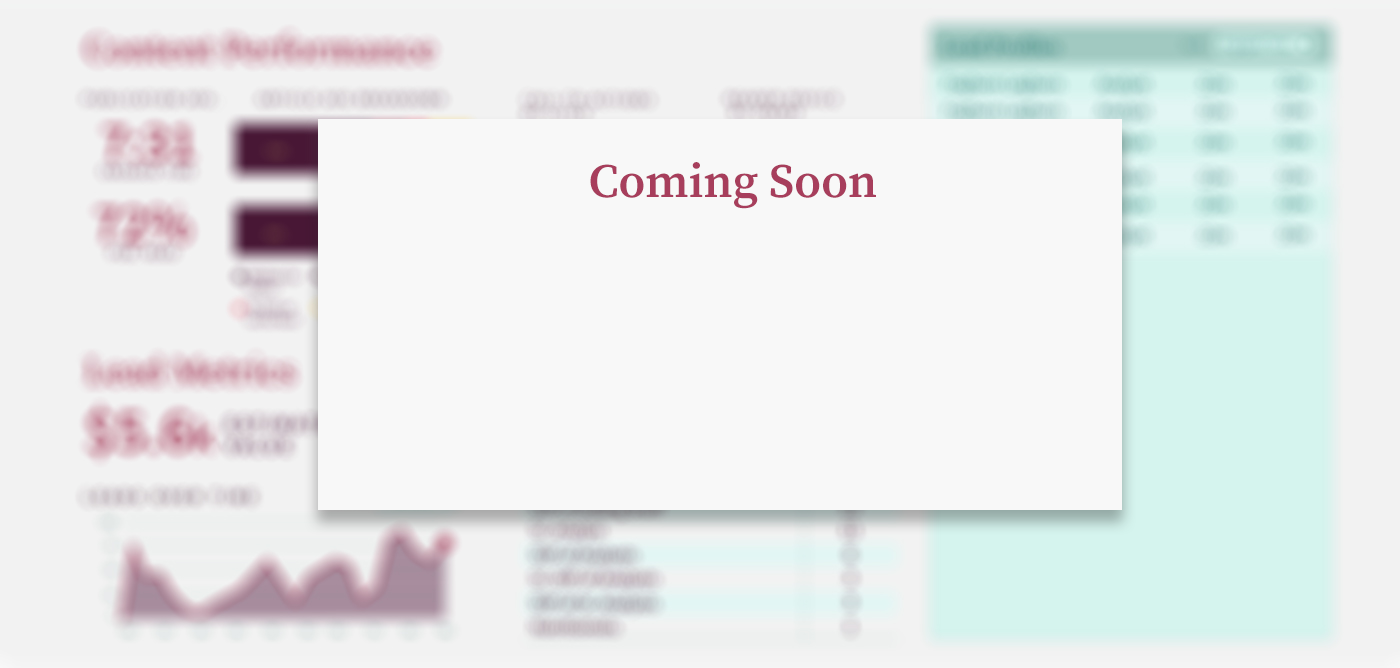
<style>
.page{position:relative;width:1400px;height:668px;background:#f8f8f8}
.page>*{position:absolute;margin:0}
.t1{font:48px "SourceSerifPro-Semibold";color:#a73e5c}
</style>
<div class="page">
<p class="t1" style="left:590px;top:162px;width:286px;height:47px">Coming Soon</p>
</div>
